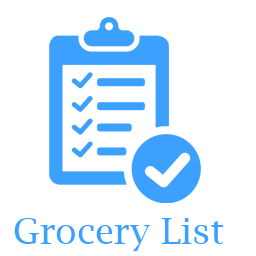
<style>
.page{position:relative;width:256px;height:256px;background:#ffffff}
.page>*{position:absolute;margin:0}
.t1{font:36px "LucidaBright";color:#3ca0ff}
</style>
<div class="page">
<p class="t1" style="left:14px;top:218px;width:210px;height:33px">Grocery List</p>
</div>
